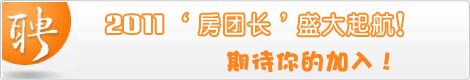
<style>
.page{position:relative;width:470px;height:80px}
.page>*{position:absolute;margin:0}
.t1{font:24px "CTZhongYuanSJ";letter-spacing:0.03em;color:#ffffff}
.t2{font:24px "Anklepants";letter-spacing:0.03em;color:#ffffff}
.t3{font:30px "CTZhongYuanSJ";letter-spacing:0.03em;color:#ffffff}
.t4{font:24px "DFPHaiBaoW12";letter-spacing:0.03em;color:#fe841d}
</style>
<div class="page">
<p class="t1" style="left:106px;top:12px;width:297px;height:24px"><span class="t2">2011 </span>‘房团长’盛大起航<span class="t3">！</span></p>
<p class="t4" style="left:227px;top:50px;width:163px;height:23px">期待你的加入！</p>
</div>
